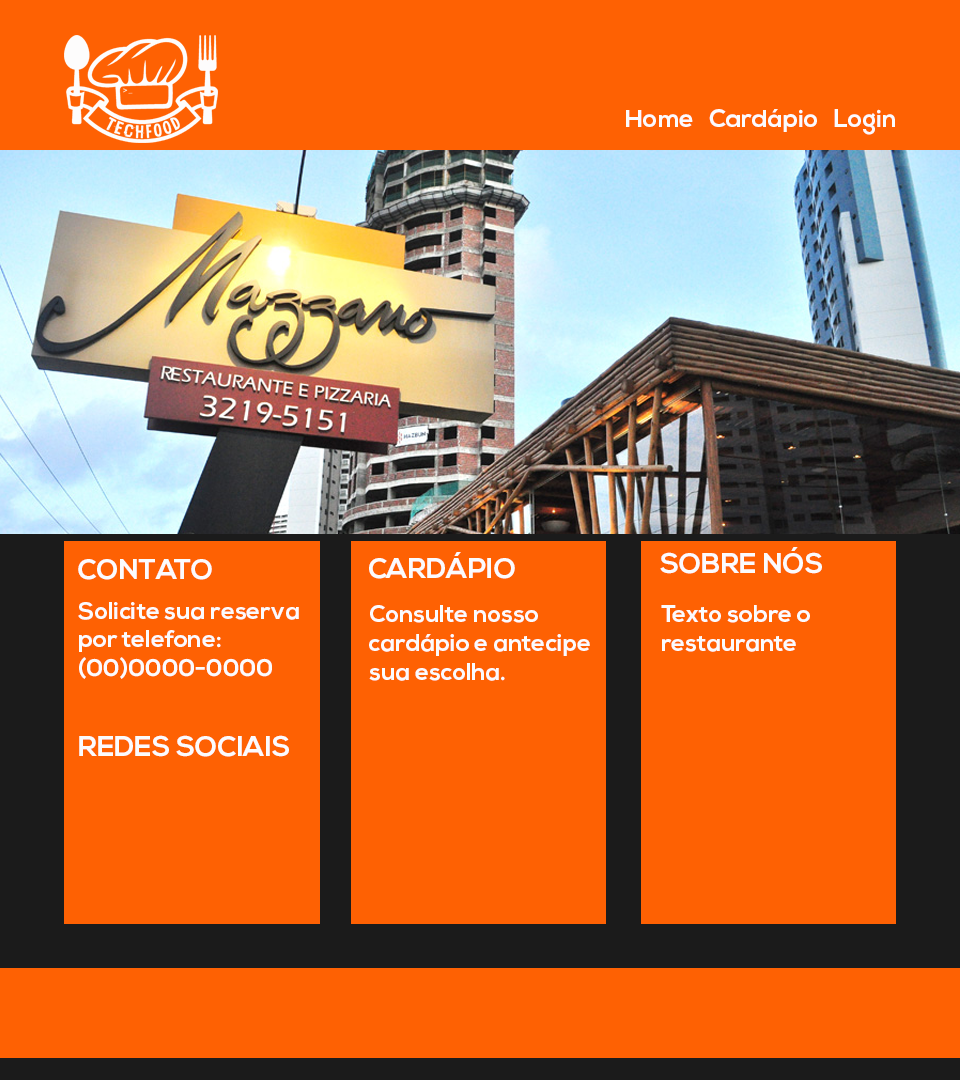
<style>
.page{position:relative;width:960px;height:1080px;background:#fe6103}
.page>*{position:absolute;margin:0}
.t1{font:24.9px "NexaBold";color:#fbfbfd}
.t2{font:28px "NexaBold";color:#fbfbfd}
.t3{font:24px "NexaBold";color:#fbfbfd}
</style>
<div class="page">
<p class="t1" style="left:626px;top:109px;width:269px;height:26px">Home   Cardápio   Login</p>
<p class="t2" style="left:369px;top:552px;width:146px;height:27px">CARDÁPIO</p>
<p class="t2" style="left:660px;top:547px;width:162px;height:27px">SOBRE NÓS</p>
<p class="t2" style="left:78px;top:559px;width:134px;height:21px">CONTATO</p>
<p class="t3" style="left:78px;top:602px;width:221px;height:77px;text-align:right">Solicite sua reserva<br>por telefone:<br>(00)0000-0000</p>
<p class="t3" style="left:369px;top:605px;width:221px;height:76px;text-align:right">Consulte nosso<br>cardápio e antecipe<br>sua escolha.</p>
<p class="t3" style="left:661px;top:605px;width:149px;height:47px;text-align:right">Texto sobre o<br>restaurante</p>
<p class="t2" style="left:79px;top:735px;width:210px;height:22px">REDES SOCIAIS</p>
</div>
